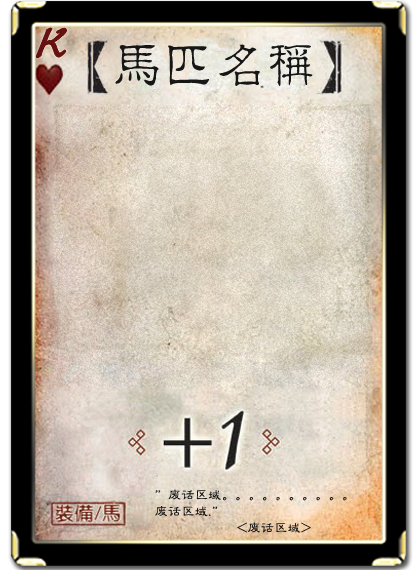
<style>
.page{position:relative;width:420px;height:570px}
.page>*{position:absolute;margin:0}
.t1{font:51.3px "Jxixinkai";color:#661213;font-weight:bold;font-style:italic}
.t2{font:51.3px "¾­µä·±½ÇÁ¥ Regular";color:#161616}
.t3{font:13.3px "FZLBJW--GB1-0";color:#161616}
</style>
<div class="page">
<p class="t1" style="left:36px;top:28px;width:31px;height:30px">K</p>
<p class="t2" style="left:115px;top:44px;width:198px;height:42px">马匹名称</p>
<p class="t3" style="left:155px;top:489px;width:192px;height:12px">”废话区域。。。。。。。。。。</p>
<p class="t3" style="left:155px;top:506px;width:63px;height:11px">废话区域.”</p>
<p class="t3" style="left:237px;top:522px;width:74px;height:11px">&lt;废话区域&gt;</p>
</div>
